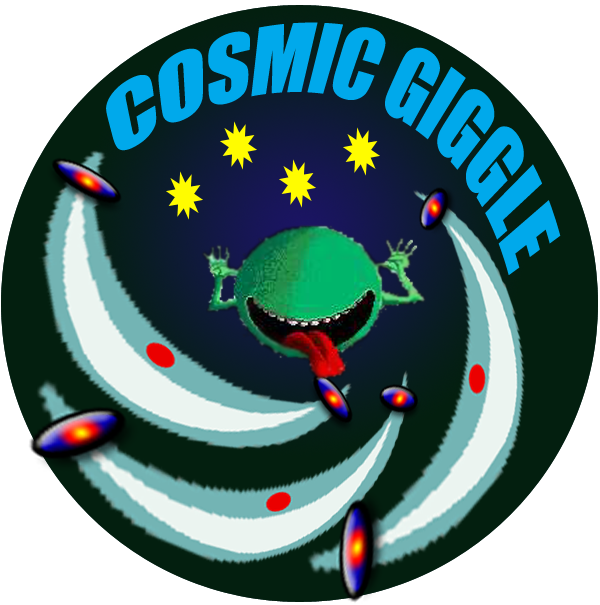
<style>
.page{position:relative;width:600px;height:605px;background:#ffffff}
.page>*{position:absolute;margin:0}
.t1{font:91.8px "Impact";color:#00a9eb;scale:0.68 1}
</style>
<div class="page">
<p class="t1" style="left:106px;top:22px;width:455px;height:253px;rotate:17deg">COSMIC GIGGLE</p>
</div>
